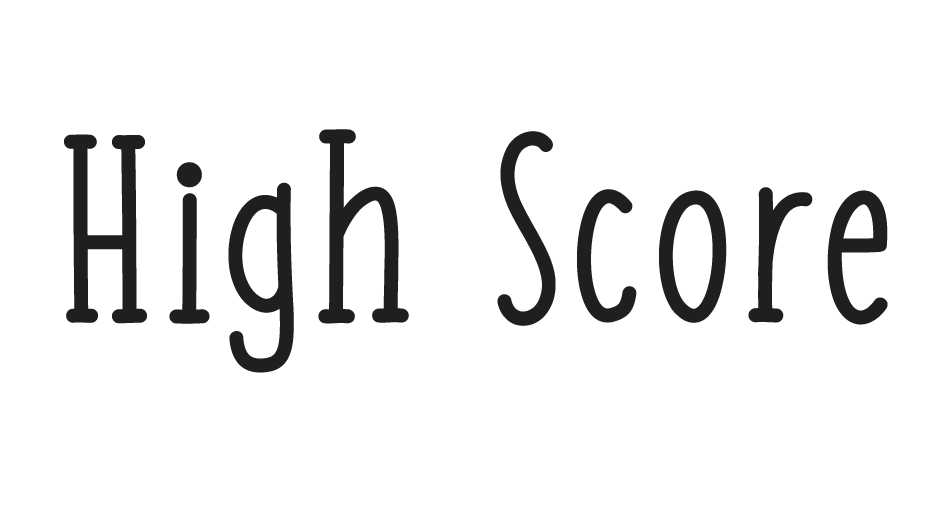
<style>
.page{position:relative;width:936px;height:517px;background:#ffffff}
.page>*{position:absolute;margin:0}
.t1{font:250px "FISH&CHIPS-Regular";color:#201f1f;font-weight:bold}
</style>
<div class="page">
<p class="t1" style="left:64px;top:129px;width:824px;height:244px">High Score</p>
</div>
